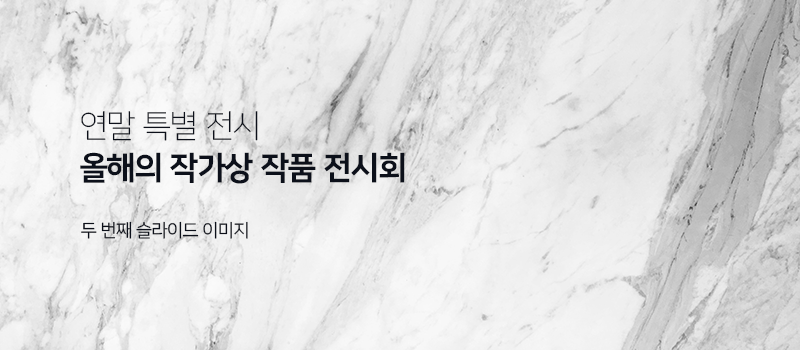
<style>
.page{position:relative;width:800px;height:350px}
.page>*{position:absolute;margin:0}
.t1{font:32px "NanumSquare_acL";color:#0c101a}
.t2{font:32px "NanumSquare_acEB";color:#0c101a}
.t3{font:18px "NanumSquare_acR";color:#0c101a}
</style>
<div class="page">
<p class="t1" style="left:81px;top:111px;width:177px;height:30px">연말 특별 전시</p>
<p class="t2" style="left:80px;top:152px;width:325px;height:32px">올해의 작가상 작품 전시회</p>
<p class="t3" style="left:81px;top:221px;width:167px;height:18px">두 번째 슬라이드 이미지</p>
</div>
